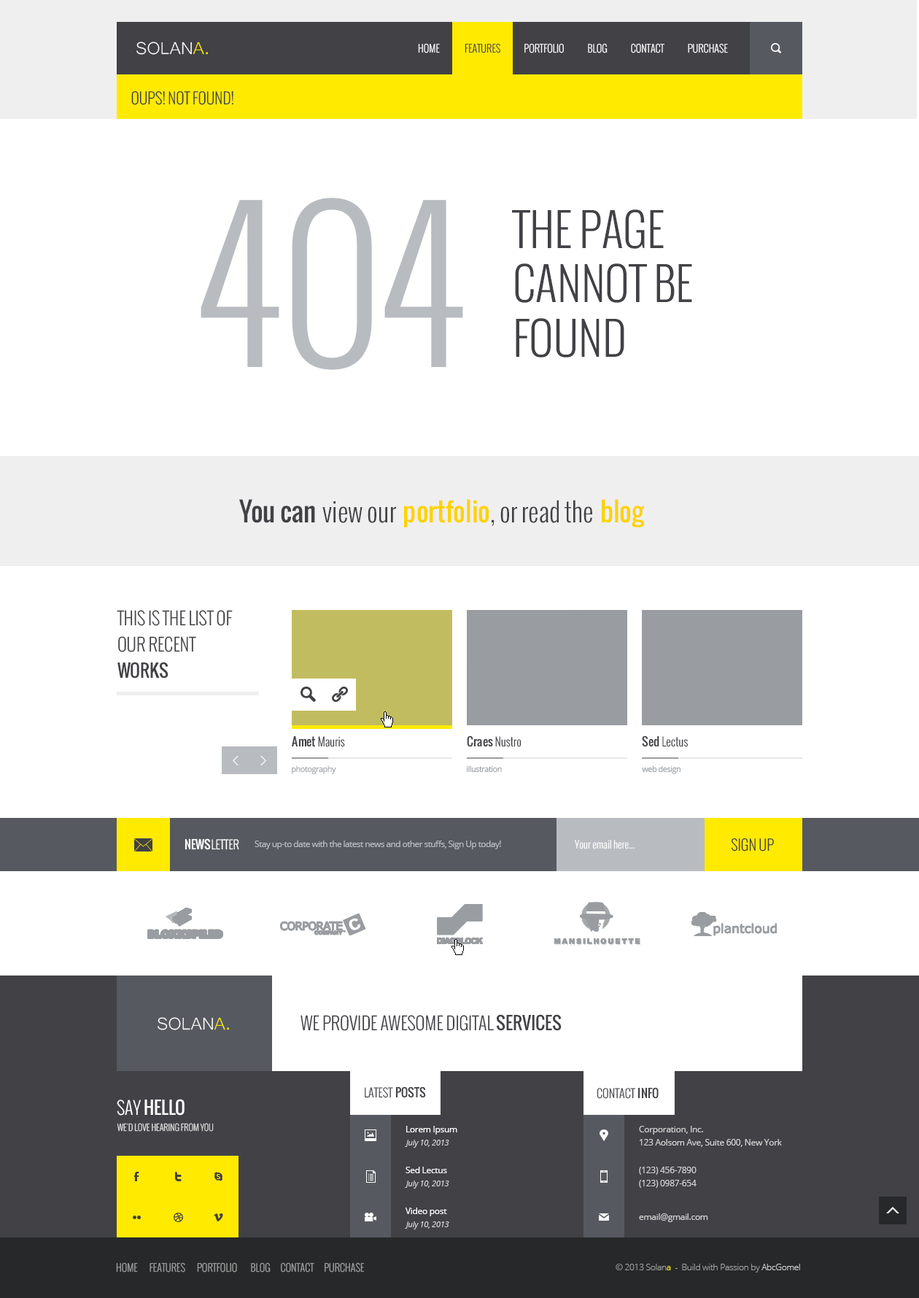
<style>
.page{position:relative;width:919px;height:1298px;background:#ffffff}
.page>*{position:absolute;margin:0}
.t1{font:21.9px "Microsoft-Yi-Baiti";color:#ffffff;text-transform:uppercase}
.t2{font:21.9px "Microsoft-Yi-Baiti";color:#ffea00;text-transform:uppercase}
.t3{font:10.2px "Oswald-Light";color:#fefefe;text-transform:uppercase}
.t4{font:10.2px "Oswald-Light";color:#414146;text-transform:uppercase}
.t5{font:15.3px "Oswald-Light";color:#414146;text-transform:uppercase}
.t6{font:198.4px "Oswald-Light";color:#b8bcc1}
.t7{font:45.2px "Oswald-Light";color:#414146}
.t8{font:26.3px "Oswald-Light";color:#414146}
.t9{font:26.3px "Oswald";color:#414146}
.t10{font:26.3px "Oswald";color:#ffd200}
.t11{font:17.5px/26.3px "Oswald-Light";color:#414146;text-transform:uppercase}
.t12{font:17.5px/26.3px "Oswald";color:#414146;text-transform:uppercase}
.t13{font:11.7px "Oswald-Light";color:#414146}
.t14{font:11.7px "Oswald";color:#414146}
.t15{font:8px "OpenSans";letter-spacing:-0.05em;color:#9fa2a6}
.t16{font:8px "OpenSans";letter-spacing:-0.05em;color:#979ca1}
.t17{font:11.7px "Oswald-Light";color:#ffffff}
.t18{font:11.7px "Oswald";color:#ffffff}
.t19{font:8.8px "OpenSans";letter-spacing:-0.05em;color:#b8bcc1}
.t20{font:10.2px "Oswald-Light";letter-spacing:0.005em;color:#ffffff}
.t21{font:14.6px "Oswald-Light";color:#414146}
.t22{font:17.5px "Oswald-Light";color:#414146;text-transform:uppercase}
.t23{font:17.5px "Oswald";color:#414146;text-transform:uppercase}
.t24{font:17.5px "Oswald";color:#fdfdfd;text-transform:uppercase}
.t25{font:17.5px "Oswald-Light";color:#fdfdfd;text-transform:uppercase}
.t26{font:8.8px "Oswald-Light";color:#d7d7d7;text-transform:uppercase}
.t27{font:8.8px/13.1px "OpenSans";letter-spacing:-0.025em;color:#ffffff}
.t28{font:8.8px/13.1px "OpenSans";letter-spacing:-0.025em;color:#d1d1d1}
.t29{font:8px "OpenSans-Italic";letter-spacing:-0.025em;color:#d1d1d1}
.t30{font:8.8px "OpenSans";letter-spacing:-0.025em;color:#ffffff}
.t31{font:8.8px "OpenSans";letter-spacing:-0.025em;color:#d1d1d1}
.t32{font:10.2px "Oswald-Light";color:#a1a1a1}
.t33{font:8.8px "OpenSans-Light";letter-spacing:-0.025em;color:#a1a1a1}
.t34{font:8.8px "OpenSans-Light";letter-spacing:-0.025em;color:#ffea00}
.t35{font:8.8px "OpenSans-Light";letter-spacing:-0.025em;color:#d1d1d1}
</style>
<div class="page">
<p class="t1" style="left:136px;top:42px;width:72px;height:13px">solan<span class="t2">a.</span></p>
<p class="t3" style="left:418px;top:43px;width:310px;height:10px">Home               <span class="t4">Features </span>             Portfolio              Blog              Contact              Purchase</p>
<p class="t5" style="left:131px;top:90px;width:102px;height:15px">Oups! Not found!</p>
<p class="t6" style="left:201px;top:198px;width:262px;height:172px">404</p>
<p class="t7" style="left:512px;top:209px;width:180px;height:148px">THE PAGE<br>CANNOT BE<br>FOUND</p>
<p class="t8" style="left:239px;top:499px;width:405px;height:28px"><span class="t9">You can </span>view our <span class="t10">portfolio</span>, or read the <span class="t10">blog</span></p>
<p class="t11" style="left:117px;top:610px;width:116px;height:68px">This is the list of our recent <span class="t12">works</span></p>
<p class="t13" style="left:292px;top:735px;width:53px;height:12px"><span class="t14">Amet</span> Mauris</p>
<p class="t13" style="left:467px;top:735px;width:54px;height:12px"><span class="t14">Craes</span> Nustro</p>
<p class="t13" style="left:642px;top:735px;width:47px;height:12px"><span class="t14">Sed</span> Lectus</p>
<p class="t15" style="left:292px;top:765px;width:44px;height:9px">photography</p>
<p class="t16" style="left:467px;top:765px;width:35px;height:7px"><span class="t15"><br></span>illustration</p>
<p class="t16" style="left:642px;top:765px;width:38px;height:9px"><span class="t15"><br></span>web design</p>
<p class="t17" style="left:185px;top:838px;width:54px;height:12px"><span class="t18">NEWS</span>LETTER</p>
<p class="t19" style="left:255px;top:840px;width:246px;height:9px">Stay up-to date with the latest news and other stuffs, Sign Up today!</p>
<p class="t20" style="left:574px;top:839px;width:61px;height:10px">Your email here...</p>
<p class="t21" style="left:731px;top:837px;width:43px;height:14px">SIGN UP</p>
<p class="t22" style="left:300px;top:1014px;width:262px;height:17px">we provide awesome digital <span class="t23">services</span></p>
<p class="t1" style="left:158px;top:1017px;width:71px;height:13px">solan<span class="t2">a.</span></p>
<p class="t13" style="left:365px;top:1086px;width:61px;height:12px">LATEST <span class="t14">POSTS</span></p>
<p class="t13" style="left:597px;top:1087px;width:62px;height:11px">CONTACT <span class="t14">INFO</span></p>
<p class="t24" style="left:117px;top:1098px;width:68px;height:17px"><span class="t25">Say </span>hello</p>
<p class="t26" style="left:117px;top:1122px;width:97px;height:9px">we'd love hearing from you</p>
<p class="t27" style="left:406px;top:1125px;width:51px;height:9px">Lorem Ipsum<br>ipsumage post</p>
<p class="t28" style="left:639px;top:1125px;width:143px;height:22px">Corporation, Inc.<br>123 Aolsom Ave, Suite 600, New York</p>
<p class="t29" style="left:405px;top:1139px;width:44px;height:8px">July 10, 2013</p>
<p class="t30" style="left:406px;top:1166px;width:41px;height:7px">Sed Lectus</p>
<p class="t28" style="left:639px;top:1166px;width:58px;height:21px">(123) 456-7890<br>(123) 0987-654</p>
<p class="t29" style="left:405px;top:1180px;width:44px;height:8px">July 10, 2013</p>
<p class="t30" style="left:406px;top:1207px;width:41px;height:9px">Video post</p>
<p class="t31" style="left:639px;top:1213px;width:69px;height:9px">email@gmail.com</p>
<p class="t29" style="left:405px;top:1221px;width:44px;height:8px">July 10, 2013</p>
<p class="t32" style="left:116px;top:1262px;width:249px;height:10px">HOME       FEATURES       PORTFOLIO        BLOG      CONTACT      PURCHASE</p>
<p class="t33" style="left:616px;top:1263px;width:184px;height:9px">© 2013 Solan<span class="t34">a </span> -  Build with Passion by <span class="t35">AbcGomel</span></p>
</div>
